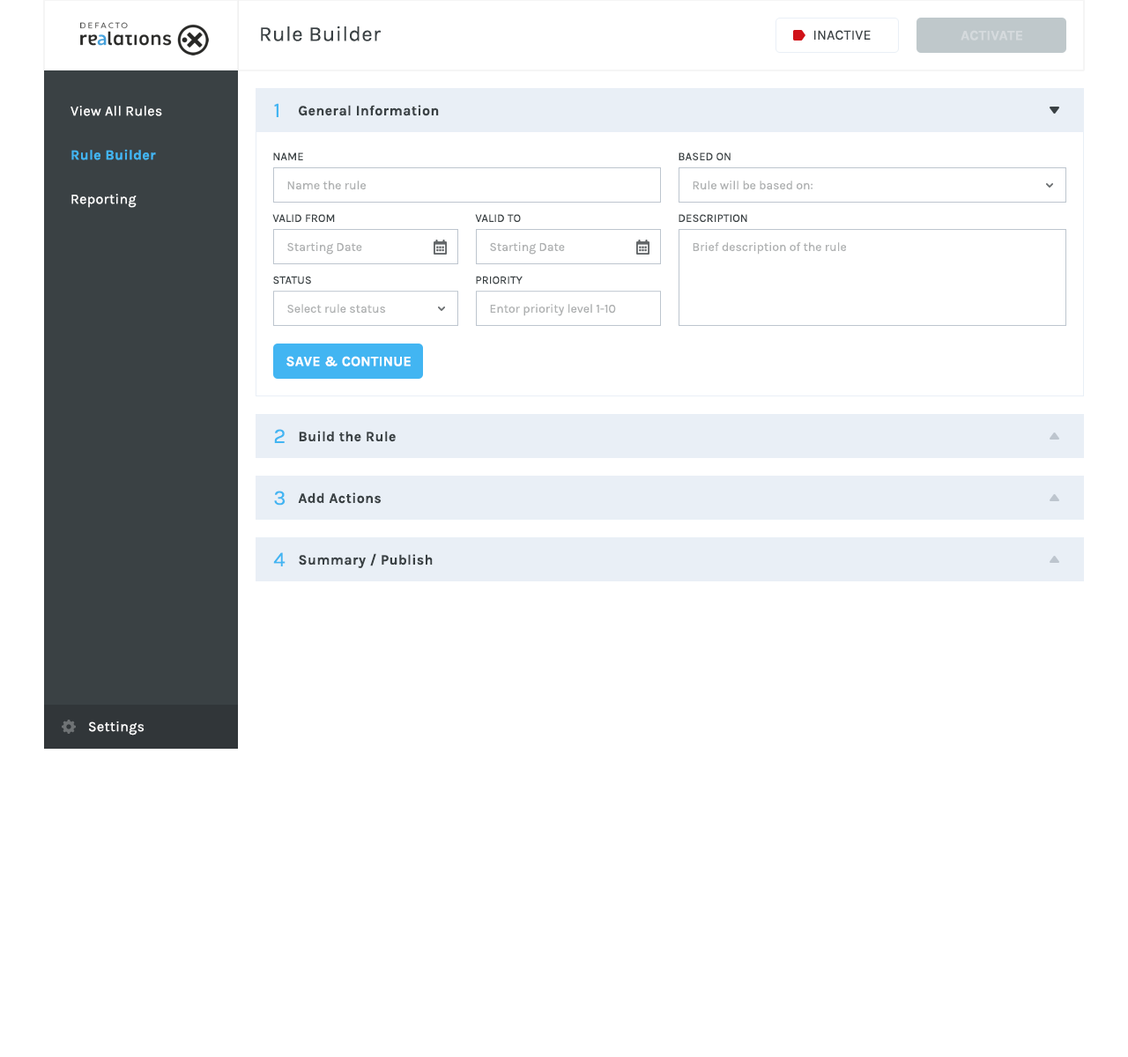
<style>
.page{position:relative;width:1128px;height:1057px;background:#ffffff}
.page>*{position:absolute;margin:0}
.t1{font:21.1px "Karla-Regular";letter-spacing:0.02em;color:#3a4144}
.t2{font:14.1px "Karla-Regular";letter-spacing:0.01em;color:#3a4144;text-transform:uppercase}
.t3{font:14.1px "Karla-Bold";letter-spacing:0.01em;color:#d5dadd;text-transform:uppercase}
.t4{font:14.1px/44.1px "Karla-Regular";letter-spacing:0.02em;color:#ffffff}
.t5{font:14.1px/44.1px "Karla-Bold";letter-spacing:0.02em;color:#42b5f2}
.t6{font:21.1px "Karla-Regular";letter-spacing:0.02em;color:#42b5f2}
.t7{font:14.1px "Karla-Bold";letter-spacing:0.02em;color:#3a4144}
.t8{font:11.5px "Karla-Regular";letter-spacing:0.01em;color:#3a4144}
.t9{font:11.5px "Karla-Regular";letter-spacing:0.01em;color:#3a4144;text-transform:uppercase}
.t10{font:12.3px "Karla-Regular";color:#aeb0b1}
.t11{font:11.4px "Karla-Regular";letter-spacing:0.01em;color:#3a4144;text-transform:uppercase}
.t12{font:14.1px "Karla-Bold";letter-spacing:0.01em;color:#ffffff;text-transform:uppercase}
.t13{font:14.1px "Karla-Regular";letter-spacing:0.02em;color:#ffffff}
</style>
<div class="page">
<p class="t1" style="left:261px;top:26px;width:120px;height:15px">Rule Builder</p>
<p class="t2" style="left:814px;top:30px;width:57px;height:11px">Inactive</p>
<p class="t3" style="left:960px;top:30px;width:62px;height:11px">Activate</p>
<p class="t4" style="left:70px;top:106px;width:92px;height:102px">View All Rules<br><span class="t5">Rule Builder<br></span>Reporting</p>
<p class="t6" style="left:274px;top:103px;width:4px;height:14px">1</p>
<p class="t7" style="left:299px;top:105px;width:140px;height:11px">General Information</p>
<p class="t8" style="left:273px;top:152px;width:30px;height:8px">NAME</p>
<p class="t9" style="left:678px;top:152px;width:52px;height:8px">based on</p>
<p class="t10" style="left:287px;top:181px;width:79px;height:9px">Name the rule</p>
<p class="t10" style="left:693px;top:181px;width:119px;height:9px">Rule will be based on:</p>
<p class="t9" style="left:272px;top:214px;width:63px;height:8px">Valid from</p>
<p class="t9" style="left:475px;top:214px;width:46px;height:8px">Valid to</p>
<p class="t9" style="left:678px;top:214px;width:69px;height:8px">description</p>
<p class="t10" style="left:287px;top:242px;width:75px;height:13px">Starting Date</p>
<p class="t10" style="left:490px;top:242px;width:75px;height:13px">Starting Date</p>
<p class="t10" style="left:693px;top:242px;width:154px;height:13px">Brief description of the rule</p>
<p class="t11" style="left:273px;top:276px;width:38px;height:9px">status</p>
<p class="t11" style="left:476px;top:276px;width:46px;height:9px">priority</p>
<p class="t10" style="left:287px;top:304px;width:99px;height:10px">Select rule status</p>
<p class="t10" style="left:490px;top:304px;width:126px;height:12px">Entor priority level 1-10</p>
<p class="t12" style="left:286px;top:356px;width:125px;height:11px">save &amp; Continue</p>
<p class="t6" style="left:274px;top:429px;width:11px;height:14px">2</p>
<p class="t7" style="left:299px;top:431px;width:97px;height:11px">Build the Rule</p>
<p class="t6" style="left:274px;top:491px;width:11px;height:15px">3</p>
<p class="t7" style="left:298px;top:493px;width:84px;height:11px">Add Actions</p>
<p class="t6" style="left:273px;top:552px;width:12px;height:15px">4</p>
<p class="t7" style="left:299px;top:553px;width:134px;height:15px">Summary / Publish</p>
<p class="t13" style="left:89px;top:722px;width:55px;height:14px">Settings</p>
</div>
